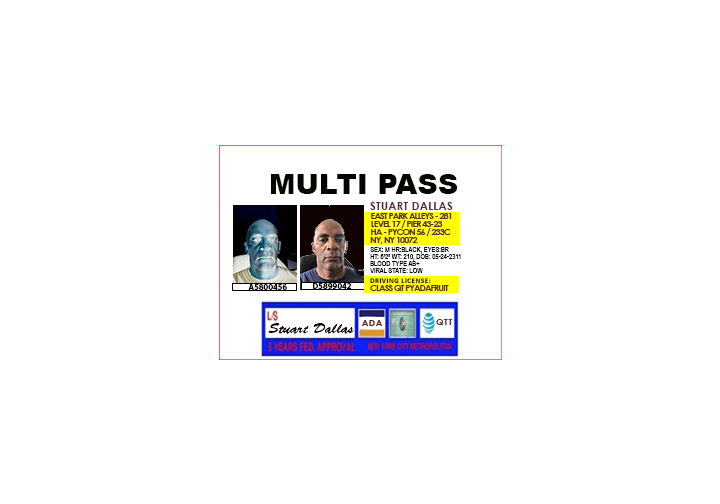
<style>
.page{position:relative;width:720px;height:504px;background:#ffffff}
.page>*{position:absolute;margin:0}
.t1{font:28.3px "Arial-Black";color:#040700}
.t2{font:11.1px "CenturyGothic-Bold";letter-spacing:0.025em;color:#602f2f}
.t3{font:8.5px "CenturyGothic-Bold";letter-spacing:-0.075em;color:#602f2f}
.t4{font:7.1px "ArialNarrow";color:#000000}
.t5{font:8.5px/4.3px "CenturyGothic-Bold";letter-spacing:-0.075em;color:#602f2f}
.t6{font:7.1px/4.3px "Calibri-Bold";letter-spacing:0.075em;color:#100e0e}
.t7{font:8.5px "MyriadPro-Bold";color:#040700}
.t8{font:8.5px "CenturyGothic-Bold";letter-spacing:0.1em;color:#602f2f}
</style>
<div class="page">
<p class="t1" style="left:271px;top:174px;width:187px;height:20px">MULTI PASS</p>
<p class="t2" style="left:370px;top:202px;width:83px;height:8px">STUART DALLAS</p>
<p class="t3" style="left:371px;top:213px;width:81px;height:6px">EAST PARK ALLEYS - 281</p>
<p class="t3" style="left:371px;top:220px;width:72px;height:8px">LEVEL 17 / PIER 43-23</p>
<p class="t3" style="left:371px;top:228px;width:80px;height:8px">HA - PYCON 56 / 233C</p>
<p class="t3" style="left:370px;top:237px;width:48px;height:7px">NY, NY 10072</p>
<p class="t4" style="left:370px;top:247px;width:79px;height:7px">SEX: M HR:BLACK, EYES:BR</p>
<p class="t4" style="left:370px;top:254px;width:91px;height:7px">HT: 6’2” WT: 210, DOB: 05-24-2311</p>
<p class="t4" style="left:370px;top:261px;width:50px;height:5px">BLOOD TYPE AB+</p>
<p class="t4" style="left:370px;top:268px;width:53px;height:5px">VIRAL STATE: LOW</p>
<p class="t5" style="left:370px;top:278px;width:79px;height:13px"><span class="t6">DRIVING LICENSE:<br></span>  <br>CLASS QT PYADAFRUIT</p>
<p class="t7" style="left:248px;top:284px;width:39px;height:6px">A5800456</p>
<p class="t7" style="left:313px;top:283px;width:39px;height:6px">D5899042</p>
<p class="t8" style="left:436px;top:319px;width:17px;height:6px">QTT</p>
</div>
